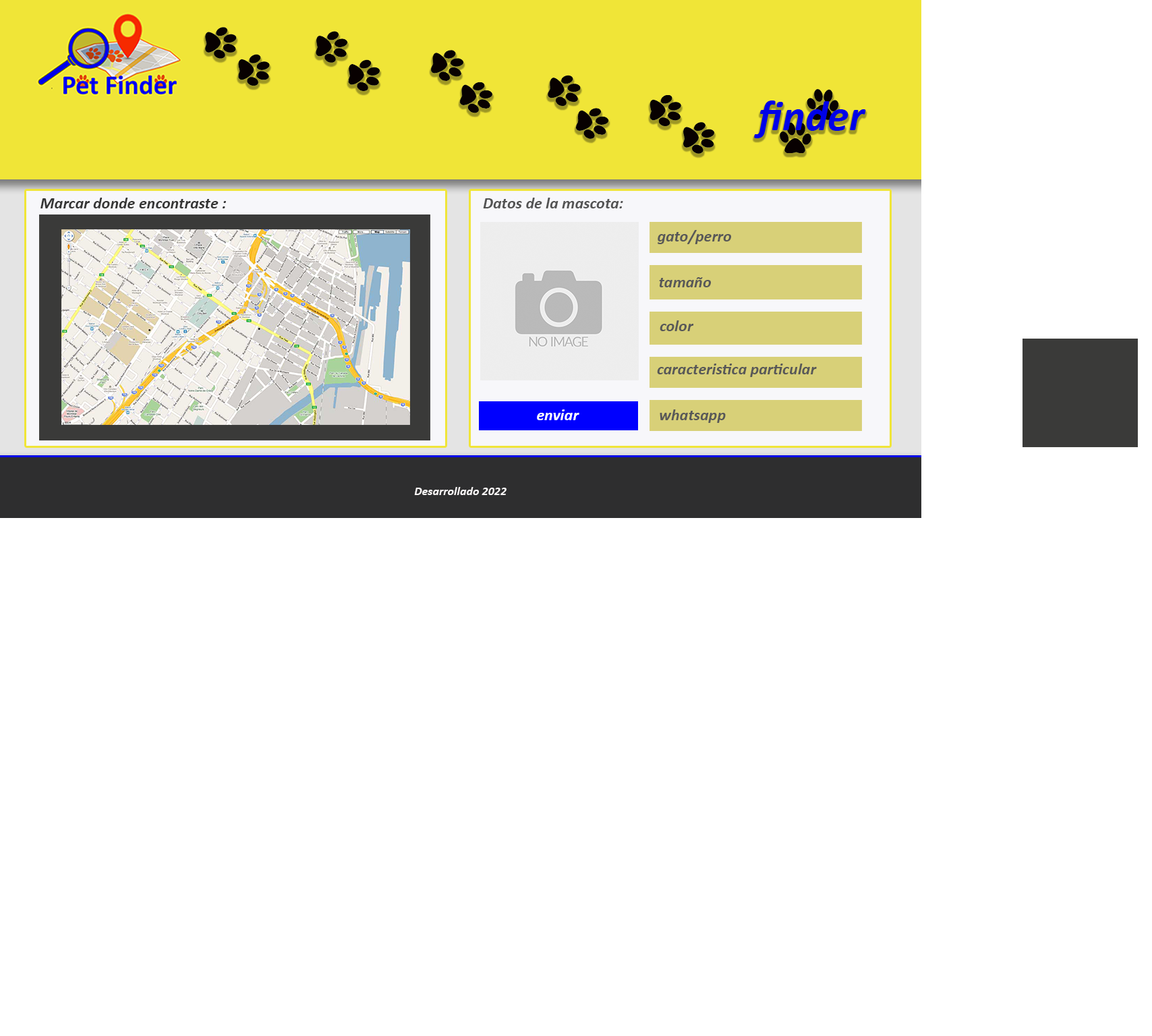
<style>
.page{position:relative;width:1152px;height:1036px;background:#ffffff}
.page>*{position:absolute;margin:0}
.t1{font:43.2px "Calibri-BoldItalic";color:#0002e8}
.t2{font:16.2px "Calibri-BoldItalic";color:#353535}
.t3{font:16.2px "Calibri-BoldItalic";color:#535353}
.t4{font:16.2px "Calibri-BoldItalic";color:#585858}
.t5{font:16.2px "Calibri-BoldItalic";color:#fcfcfe}
.t6{font:12.1px "Calibri-BoldItalic";color:#faf7f7}
</style>
<div class="page">
<p class="t1" style="left:754px;top:100px;width:112px;height:38px">finder</p>
<p class="t2" style="left:40px;top:198px;width:186px;height:10px">Marcar donde encontraste :</p>
<p class="t3" style="left:483px;top:198px;width:140px;height:10px">Datos de la mascota:</p>
<p class="t4" style="left:657px;top:230px;width:74px;height:14px">gato/perro</p>
<p class="t4" style="left:659px;top:277px;width:52px;height:10px">tamaño</p>
<p class="t4" style="left:659px;top:320px;width:35px;height:11px">color</p>
<p class="t4" style="left:657px;top:363px;width:159px;height:14px">caracteristica particular</p>
<p class="t5" style="left:537px;top:409px;width:42px;height:11px">enviar</p>
<p class="t4" style="left:659px;top:409px;width:66px;height:14px">whatsapp</p>
<p class="t6" style="left:414px;top:487px;width:92px;height:8px">Desarrollado 2022</p>
</div>
